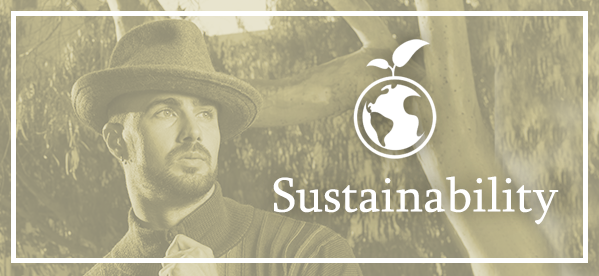
<style>
.page{position:relative;width:599px;height:276px}
.page>*{position:absolute;margin:0}
.t1{font:49.3px "Sylfaen";letter-spacing:0.01em;color:#ffffff}
</style>
<div class="page">
<p class="t1" style="left:273px;top:176px;width:286px;height:49px">Sustainability</p>
</div>
